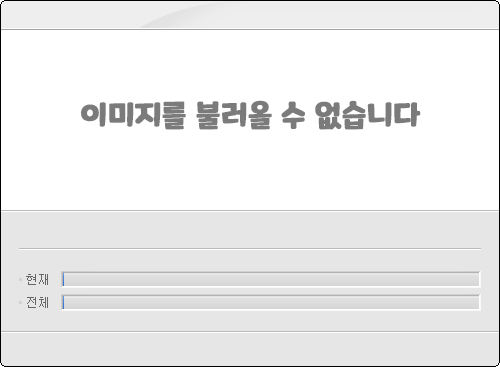
<style>
.page{position:relative;width:500px;height:367px;background:#ffffff}
.page>*{position:absolute;margin:0}
.t1{font:30px "MaplestoryBold";color:#7b7b7b;font-weight:bold}
.t2{font:30px "MaplestoryBold";color:#000000;font-weight:bold}
</style>
<div class="page">
<p class="t1" style="left:81px;top:100px;width:340px;height:30px"><span class="t2"><br><br><br><br><br><br></span>이미지를 불러올 수 없습니다</p>
</div>
